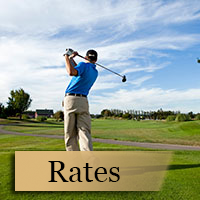
<style>
.page{position:relative;width:200px;height:200px}
.page>*{position:absolute;margin:0}
.t1{font:30px "Georgia";color:#000000}
</style>
<div class="page">
<p class="t1" style="left:48px;top:161px;width:72px;height:21px">Rates</p>
</div>
